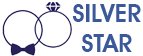
<style>
.page{position:relative;width:143px;height:56px;background:#ffffff}
.page>*{position:absolute;margin:0}
.t1{font:25px "AvantGardeITCbyBT-Demi";color:#3b5999;text-transform:uppercase}
</style>
<div class="page">
<p class="t1" style="left:72px;top:4px;width:69px;height:48px;text-align:center">Silver<br>Star</p>
</div>
